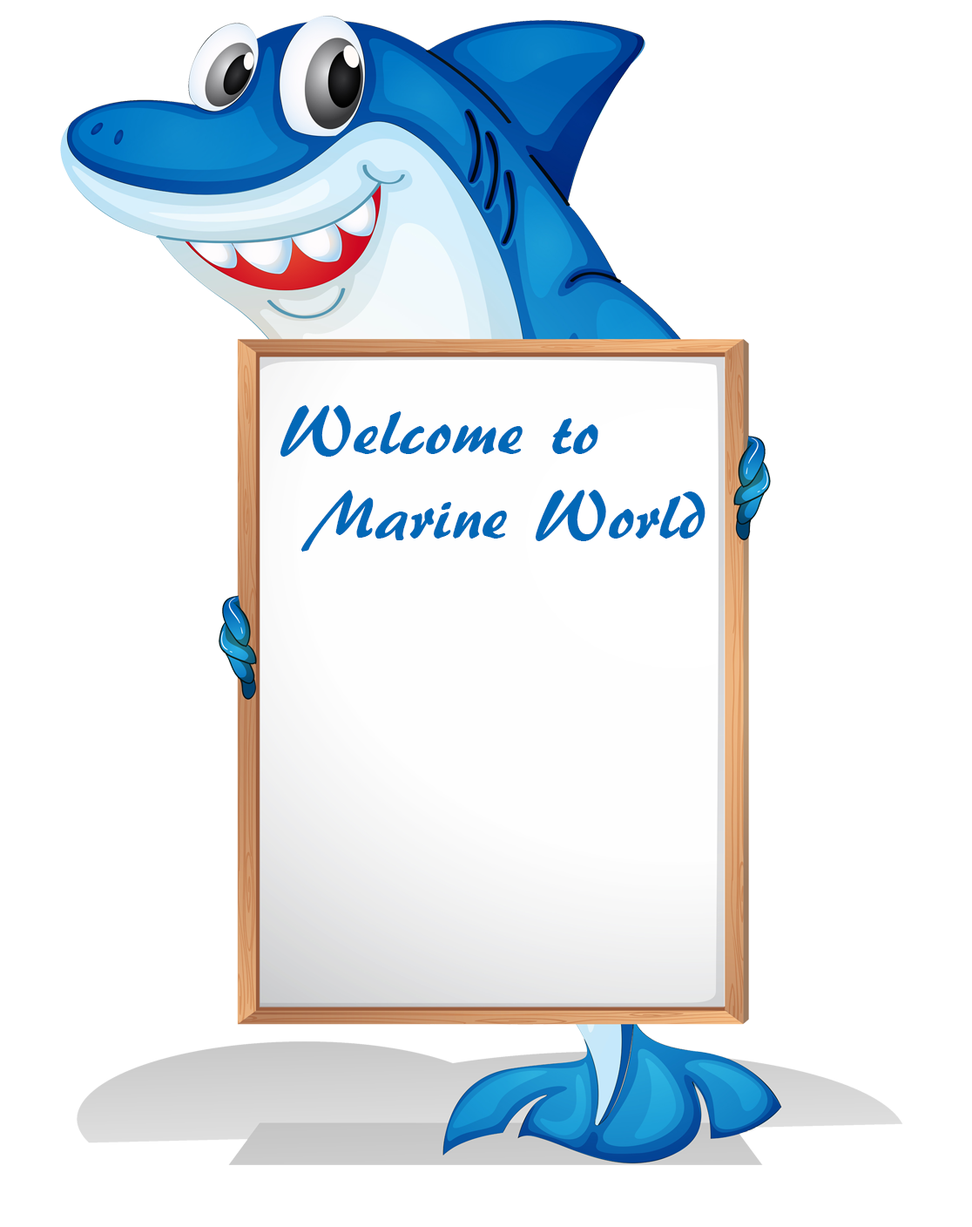
<style>
.page{position:relative;width:972px;height:1227px;background:#ffffff}
.page>*{position:absolute;margin:0}
.t1{font:70.7px "ARBERKLEY";color:#0268b7}
</style>
<div class="page">
<p class="t1" style="left:281px;top:405px;width:425px;height:146px">Welcome to<br> Marine World</p>
</div>
